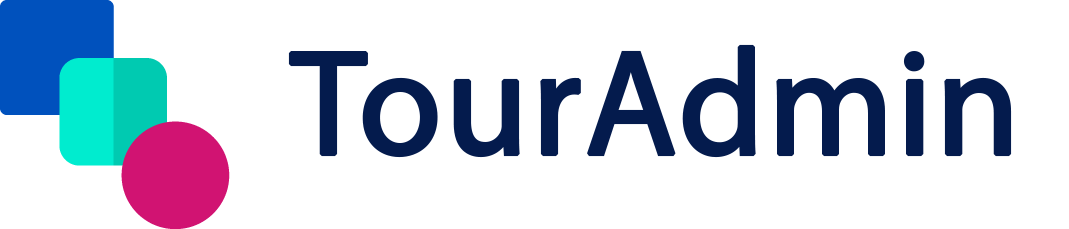
<style>
.page{position:relative;width:1069px;height:229px;background:#ffffff}
.page>*{position:absolute;margin:0}
.t1{font:150px "MyriadPro-Regular";color:#041b4d;font-weight:bold}
</style>
<div class="page">
<p class="t1" style="left:288px;top:44px;width:724px;height:114px">TourAdmin</p>
</div>
